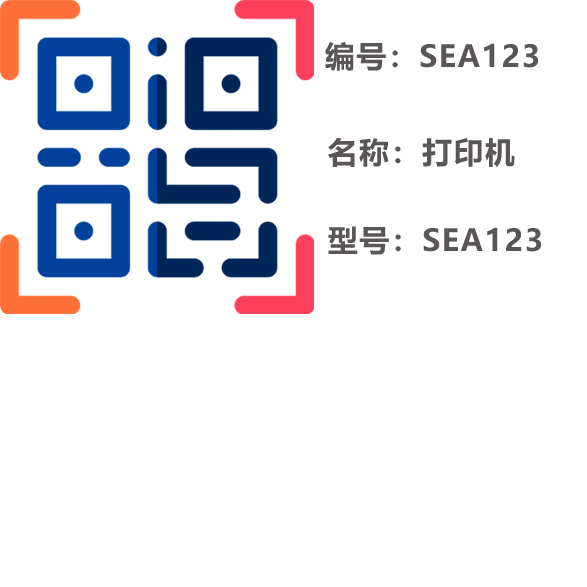
<style>
.page{position:relative;width:587px;height:587px;background:#ffffff}
.page>*{position:absolute;margin:0}
.t1{font:30px "MicrosoftYaHeiUI-Bold";letter-spacing:0.05em;color:#636262}
</style>
<div class="page">
<p class="t1" style="left:325px;top:42px;width:213px;height:29px">编号：SEA123</p>
<p class="t1" style="left:328px;top:138px;width:187px;height:29px">名称：打印机</p>
<p class="t1" style="left:328px;top:226px;width:213px;height:29px">型号：SEA123</p>
</div>
